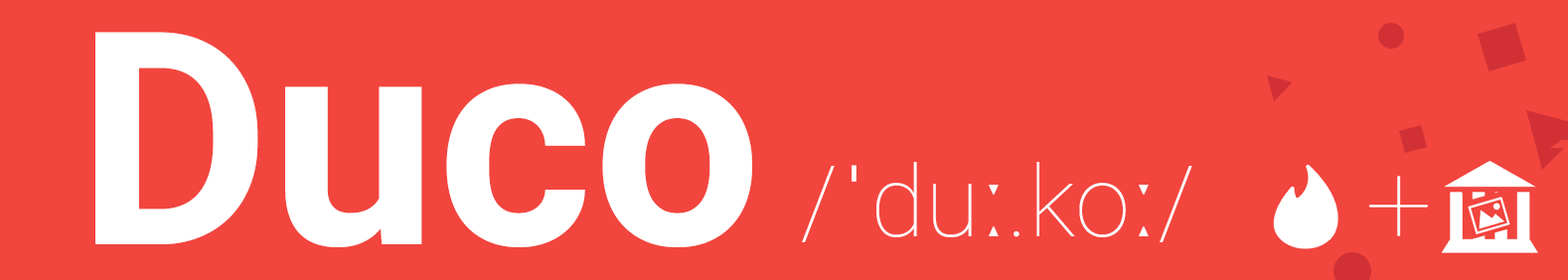
<style>
.page{position:relative;width:1568px;height:280px;background:#f2453e}
.page>*{position:absolute;margin:0}
.t1{font:298.1px "Roboto-Bold";color:#ffffff}
.t2{font:99.4px "Roboto-Thin";color:#ffffff}
.t3{font:99.4px "ArialMT";color:#ffffff}
</style>
<div class="page">
<p class="t1" style="left:95px;top:32px;width:657px;height:215px">Duco</p>
<p class="t2" style="left:802px;top:162px;width:390px;height:80px">/<span class="t3">ˈ</span>du<span class="t3">ː</span>.ko<span class="t3">ː</span>/</p>
</div>
